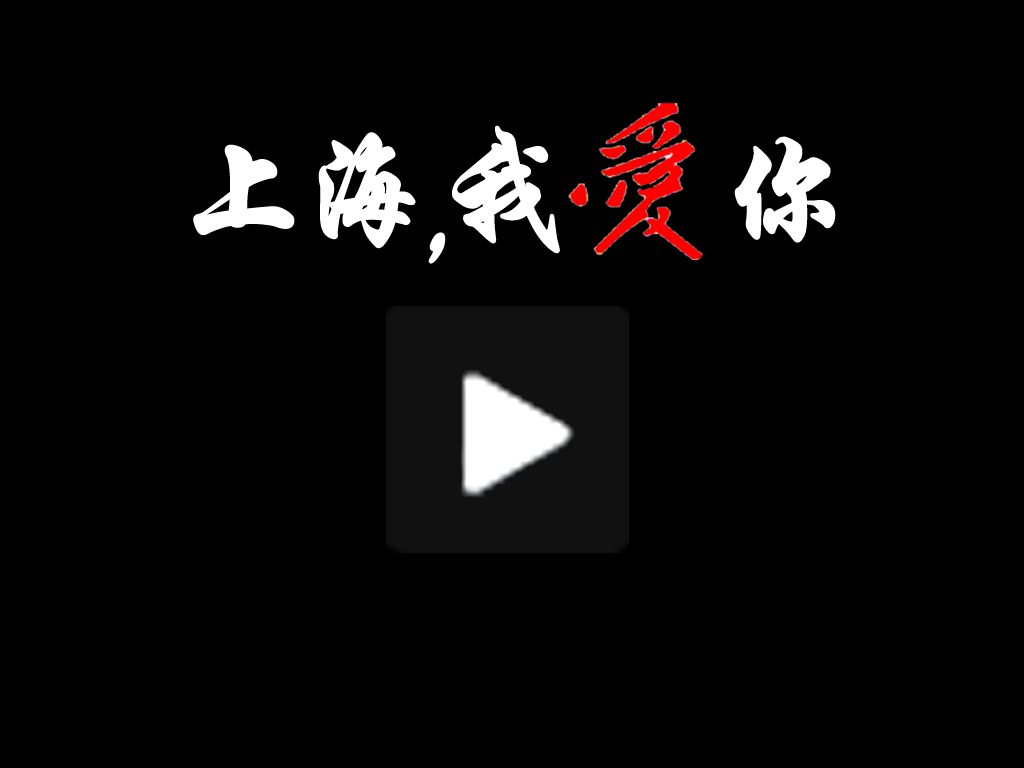
<style>
.page{position:relative;width:1024px;height:768px;background:#000000}
.page>*{position:absolute;margin:0}
.t1{font:132.2px "STXingkai";color:#ffffff;font-weight:bold}
</style>
<div class="page">
<p class="t1" style="left:452px;top:125px;width:108px;height:129px">我</p>
<p class="t1" style="left:318px;top:132px;width:98px;height:117px">海</p>
<p class="t1" style="left:734px;top:136px;width:102px;height:107px">你</p>
<p class="t1" style="left:193px;top:144px;width:102px;height:92px">上</p>
<p class="t1" style="left:428px;top:232px;width:18px;height:32px">，</p>
</div>
